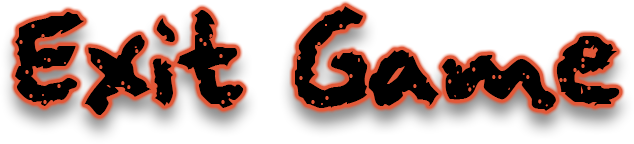
<style>
.page{position:relative;width:634px;height:144px;background:#ffffff}
.page>*{position:absolute;margin:0}
.t1{font:100px "squeakychalksound";color:#000000}
</style>
<div class="page">
<p class="t1" style="left:15px;top:6px;width:605px;height:109px">Exit Game</p>
</div>
